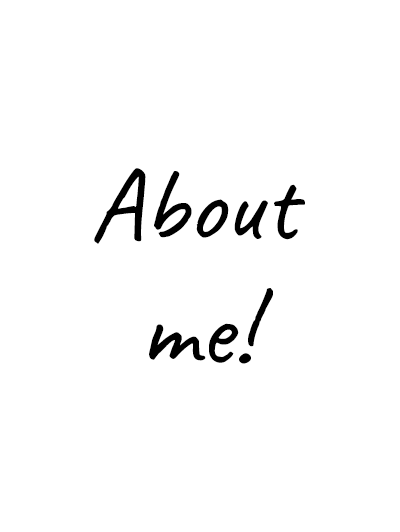
<style>
.page{position:relative;width:400px;height:532px;background:#ffffff}
.page>*{position:absolute;margin:0}
.t1{font:104.2px "Caveat-Regular";color:#000000}
</style>
<div class="page">
<p class="t1" style="left:94px;top:168px;width:211px;height:196px">About<br>   me!</p>
</div>
